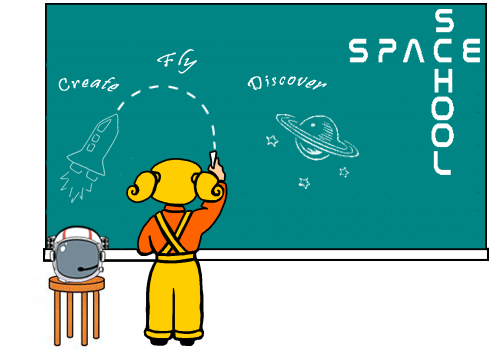
<style>
.page{position:relative;width:500px;height:350px;background:#008484}
.page>*{position:absolute;margin:0}
.t1{font:18px "Pristina-Regular";letter-spacing:0.1em;color:#ffffff}
</style>
<div class="page">
<p class="t1" style="left:157px;top:49px;width:40px;height:25px">Fly</p>
<p class="t1" style="left:58px;top:77px;width:62px;height:15px">Create</p>
<p class="t1" style="left:247px;top:75px;width:80px;height:15px">Discover</p>
</div>
